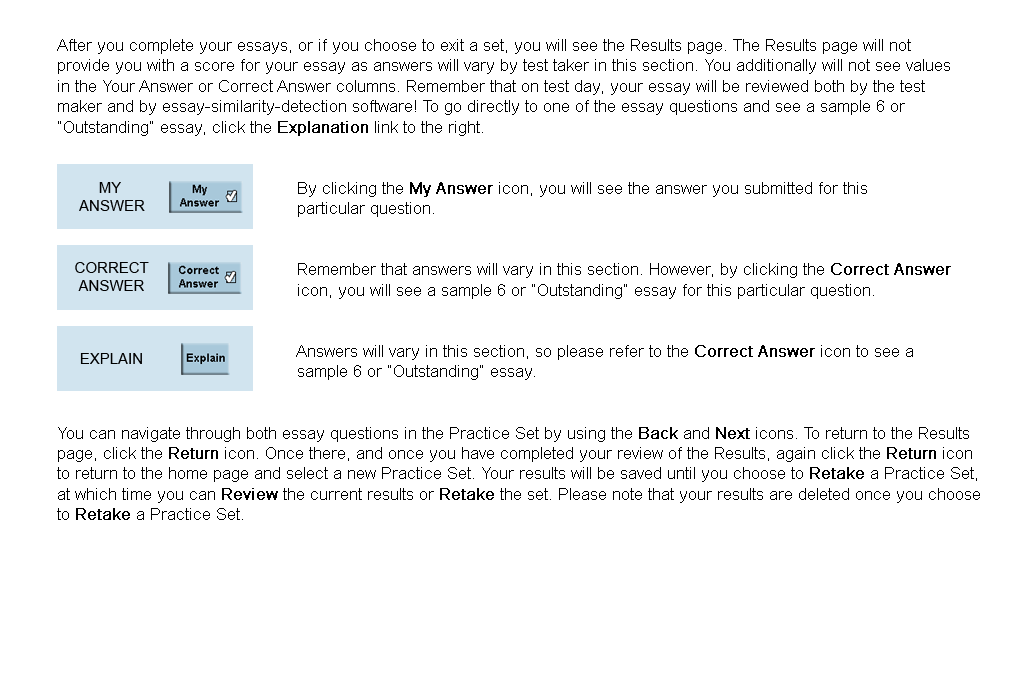
<style>
.page{position:relative;width:1024px;height:680px;background:#ffffff}
.page>*{position:absolute;margin:0}
.t1{font:17px "ArialMT";color:#000000}
.t2{font:16px "ArialMT";color:#000000;font-weight:bold}
.t3{font:15px "ArialMT";color:#000000}
</style>
<div class="page">
<p class="t1" style="left:57px;top:39px;width:923px;height:481px">After you complete your essays, or if you choose to exit a set, you will see the Results page. The Results page will not <br>provide you with a score for your essay as answers will vary by test taker in this section. You additionally will not see values <br>in the Your Answer or Correct Answer columns. Remember that on test day, your essay will be reviewed both by the test <br>maker and by essay-similarity-detection software! To go directly to one of the essay questions and see a sample 6 or <br>“Outstanding” essay, click the <span class="t2">Explanation</span> link to the right. <br><br>                                         <br>                                                By clicking the <span class="t2">My Answer</span> icon, you will see the answer you submitted for this <br>                                                particular question. <br><br><br>                                                Remember that answers will vary in this section. However, by clicking the <span class="t2">Correct Answer</span> <br>                                                icon, you will see a sample 6 or “Outstanding” essay for this particular question.<br><br><br>                                                Answers will vary in this section, so please refer to the <span class="t2">Correct Answer</span> icon to see a <br>                                                sample 6 or “Outstanding” essay.<br><br><br>You can navigate through both essay questions in the Practice Set by using the <span class="t2">Back</span> and <span class="t2">Next</span> icons. To return to the Results <br>page, click the <span class="t2">Return</span> icon. Once there, and once you have completed your review of the Results, again click the <span class="t2">Return</span> icon <br>to return to the home page and select a new Practice Set. Your results will be saved until you choose to <span class="t2">Retake</span> a Practice Set, <br>at which time you can <span class="t2">Review</span> the current results or <span class="t2">Retake</span> the set. Please note that your results are deleted once you choose <br>to <span class="t2">Retake</span> a Practice Set.</p>
<p class="t3" style="left:79px;top:182px;width:66px;height:29px;text-align:center">MY <br>ANSWER</p>
<p class="t3" style="left:75px;top:262px;width:74px;height:29px;text-align:center">CORRECT<br>ANSWER</p>
<p class="t3" style="left:80px;top:353px;width:62px;height:11px">EXPLAIN</p>
</div>
